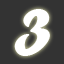
<style>
.page{position:relative;width:64px;height:64px;background:#333333}
.page>*{position:absolute;margin:0}
.t1{font:72px "ForteMT";color:#ffffff}
</style>
<div class="page">
<p class="t1" style="left:14px;top:9px;width:36px;height:47px">3</p>
</div>
